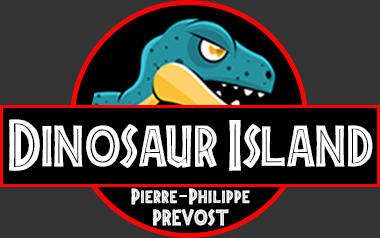
<style>
.page{position:relative;width:380px;height:238px;background:#333333}
.page>*{position:absolute;margin:0}
.t1{font:99px "Jurassic-Park-Regular";letter-spacing:0.025em;color:#ffffff}
.t2{font:30px/21px "Jurassic-Park-Regular";letter-spacing:0.05em;color:#ffffff}
.t3{font:30px/21px "MyriadPro-Regular";letter-spacing:0.05em;color:#ffffff}
</style>
<div class="page">
<p class="t1" style="left:9px;top:119px;width:364px;height:52px">Dinosaur Island</p>
<p class="t2" style="left:131px;top:188px;width:119px;height:38px;text-align:center">Pierre<span class="t3">-</span>Philippe <br>PREVOST</p>
</div>
